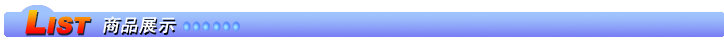
<style>
.page{position:relative;width:724px;height:42px;background:#ffffff}
.page>*{position:absolute;margin:0}
.t1{font:32px "Arial-Black";font-variant:small-caps;font-weight:bold;font-style:italic}
.t2{font:18px "SimHei";color:#ffffff;font-variant:small-caps;font-weight:bold;font-style:italic}
</style>
<div class="page">
<p class="t1" style="left:25px;top:10px;width:66px;height:24px">List</p>
<p class="t2" style="left:103px;top:16px;width:73px;height:17px">商品展示</p>
</div>
